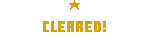
<style>
.page{position:relative;width:150px;height:42px;background:#ffffff}
.page>*{position:absolute;margin:0}
.t1{font:15px "MinecraftTen";color:#dca100}
</style>
<div class="page">
<p class="t1" style="left:43px;top:21px;width:63px;height:11px">cleared!</p>
</div>
